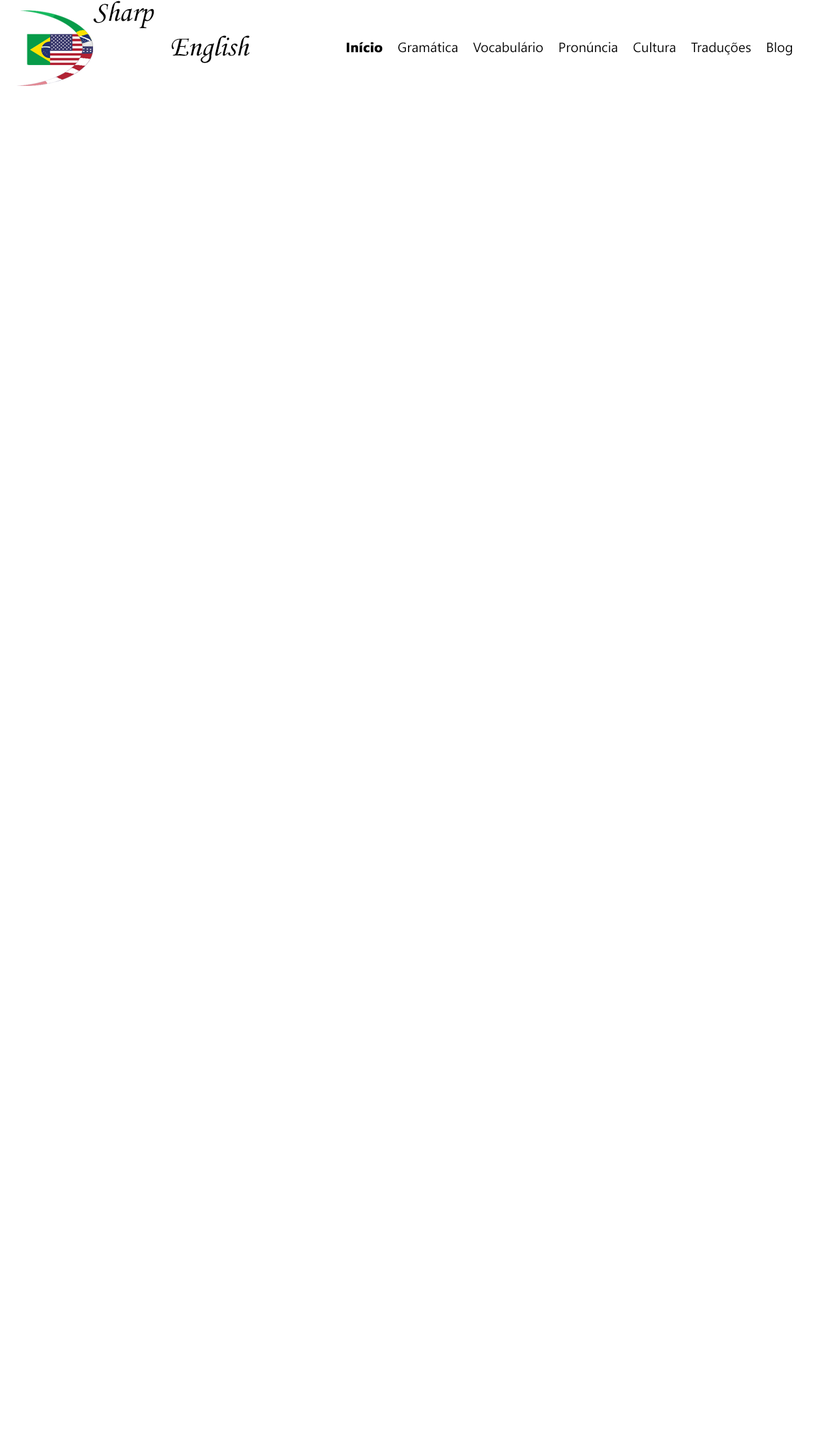
<style>
.page{position:relative;width:833px;height:1432px;background:#ffffff}
.page>*{position:absolute;margin:0}
.t1{font:28.9px "MonotypeCorsiva";color:#000000}
.t2{font:13.6px "SegoeUI";color:#000000}
.t3{font:13.6px "SegoeUI-Bold";color:#000000;font-weight:bold}
</style>
<div class="page">
<p class="t1" style="left:93px;top:1px;width:157px;height:62px">Sharp <br>    English</p>
<p class="t2" style="left:346px;top:42px;width:446px;height:13px"><span class="t3">Início</span>    Gramática    Vocabulário    Pronúncia    Cultura    Traduções    Blog</p>
</div>
